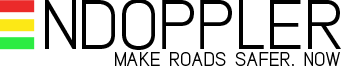
<style>
.page{position:relative;width:341px;height:67px;background:#ffffff}
.page>*{position:absolute;margin:0}
.t1{font:120px "Lintel";color:#000000;font-variant:small-caps}
.t2{font:120px "Lintel";color:#ffffff;font-variant:small-caps}
.t3{font:48px "Lintel";color:#000000;font-variant:small-caps}
</style>
<div class="page">
<p class="t1" style="left:45px;top:0px;width:296px;height:50px"><span class="t2">  </span>NDOPPLER</p>
<p class="t3" style="left:115px;top:52px;width:225px;height:14px">make roads safer. now</p>
</div>
